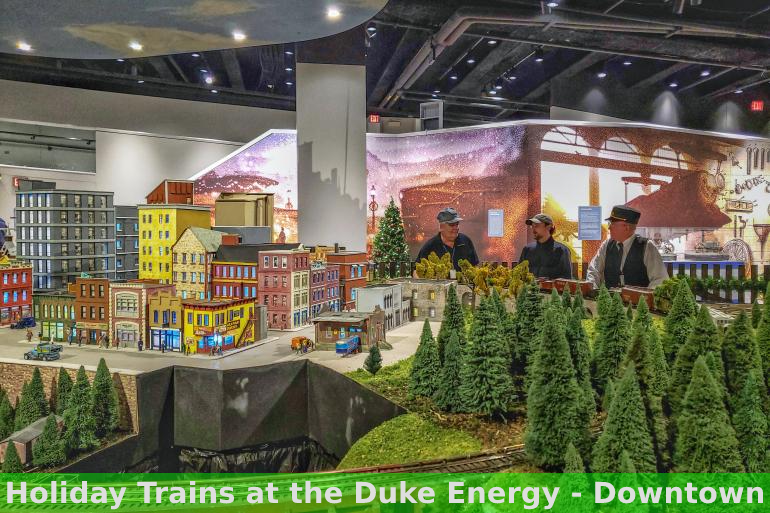
<style>
.page{position:relative;width:770px;height:513px}
.page>*{position:absolute;margin:0}
.t1{font:29px "DejaVuSans-Bold";color:#dedede}
</style>
<div class="page">
<p class="t1" style="left:7px;top:480px;width:757px;height:30px">Holiday Trains at the Duke Energy - Downtown</p>
</div>
